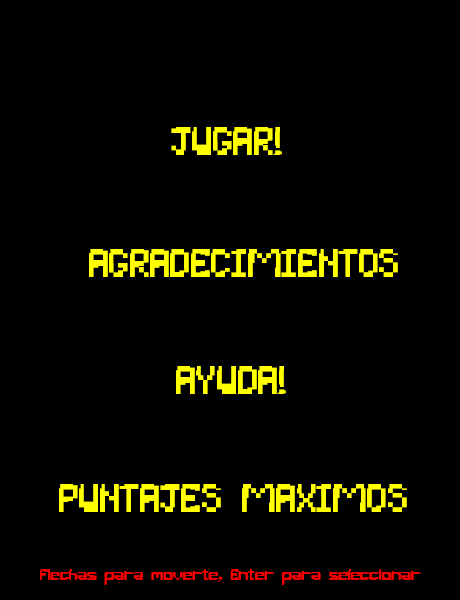
<style>
.page{position:relative;width:460px;height:600px;background:#000000}
.page>*{position:absolute;margin:0}
.t1{font:40px "PixelBug";color:#ffff00}
.t2{font:16px "PixelBug";color:#ff0000}
</style>
<div class="page">
<p class="t1" style="left:171px;top:127px;width:111px;height:28px">JUGAR!</p>
<p class="t1" style="left:89px;top:249px;width:309px;height:28px">AGRADECIMIENTOS</p>
<p class="t1" style="left:176px;top:366px;width:110px;height:28px">AYUDA!</p>
<p class="t1" style="left:59px;top:484px;width:348px;height:28px">PUNTAJES MAXIMOS</p>
<p class="t2" style="left:40px;top:569px;width:381px;height:16px">Flechas para moverte, Enter para seleccionar</p>
</div>
